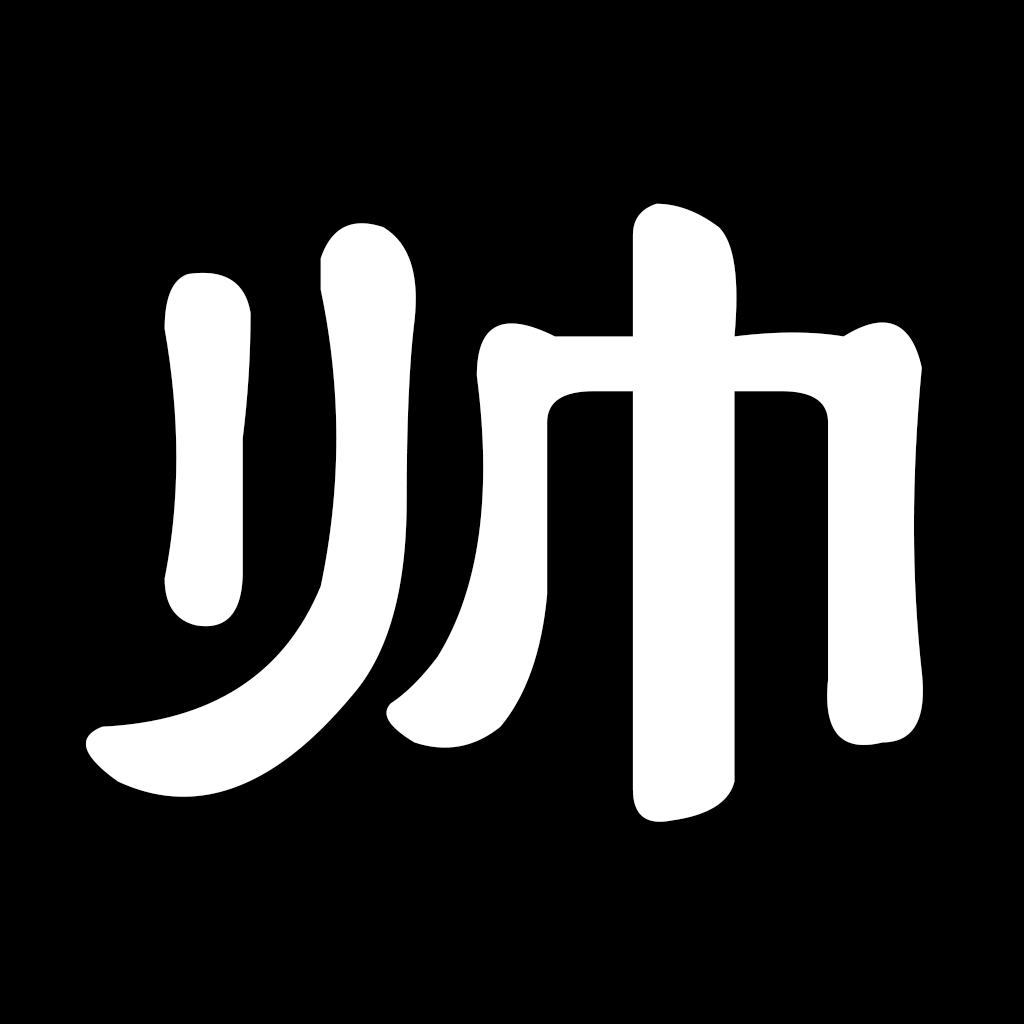
<style>
.page{position:relative;width:1024px;height:1024px;background:#000000}
.page>*{position:absolute;margin:0}
.t1{font:999px "LiSu";color:#ffffff}
</style>
<div class="page">
<p class="t1" style="left:85px;top:203px;width:838px;height:619px">帅</p>
</div>
